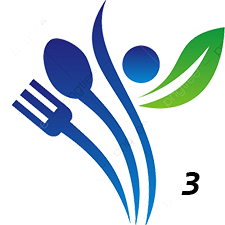
<style>
.page{position:relative;width:225px;height:225px;background:#ffffff}
.page>*{position:absolute;margin:0}
.t1{font:36px "Consolas-BoldItalic";color:#000000}
</style>
<div class="page">
<p class="t1" style="left:181px;top:172px;width:19px;height:23px">3</p>
</div>
